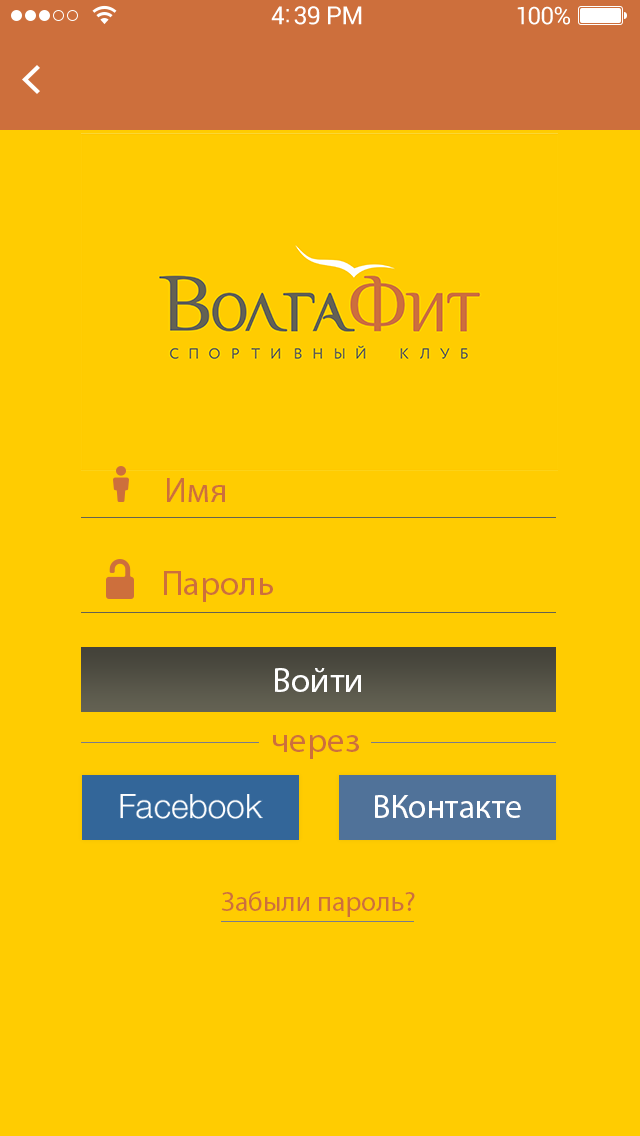
<style>
.page{position:relative;width:640px;height:1136px;background:#ffcc01}
.page>*{position:absolute;margin:0}
.t1{font:35px "MyriadPro-Regular";color:#cd6f3c}
.t2{font:35px "MyriadPro-Regular";color:#ffffff}
.t3{font:33.7px "HelveticaNeue-Light";color:#ffffff}
.t4{font:33.7px "MyriadPro-Regular";color:#ffffff}
.t5{font:27.8px "MyriadPro-Regular";color:#cd6f3c}
</style>
<div class="page">
<p class="t1" style="left:167px;top:478px;width:58px;height:24px">Имя</p>
<p class="t1" style="left:164px;top:571px;width:109px;height:31px">Пароль</p>
<p class="t2" style="left:275px;top:668px;width:86px;height:24px">Войти</p>
<p class="t1" style="left:273px;top:735px;width:86px;height:24px">через</p>
<p class="t3" style="left:120px;top:794px;width:143px;height:25px">Facebook</p>
<p class="t4" style="left:375px;top:795px;width:146px;height:23px">ВКонтакте</p>
<p class="t5" style="left:221px;top:891px;width:194px;height:26px">Забыли пароль?</p>
</div>
